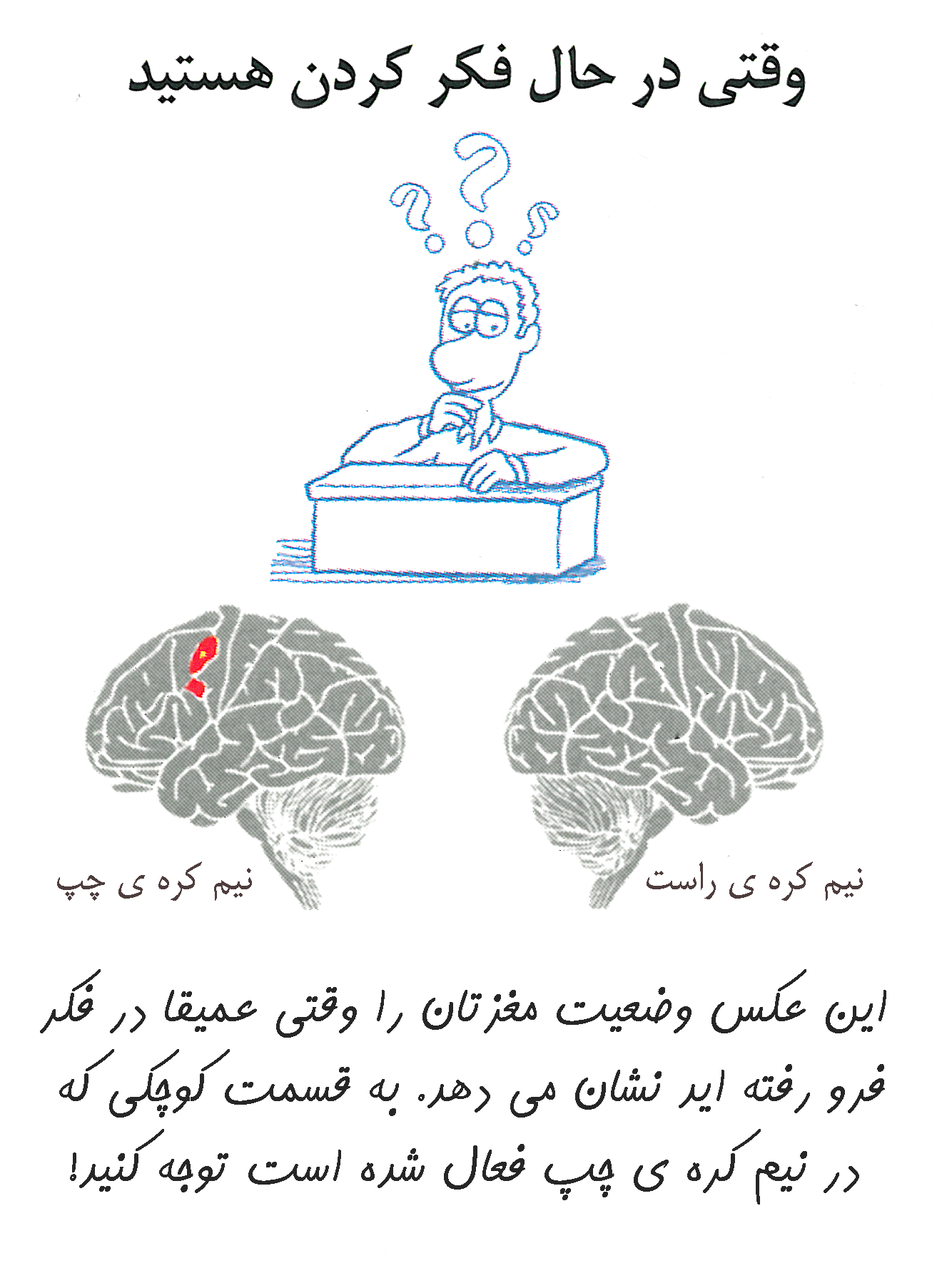
<style>
.page{position:relative;width:937px;height:1273px;background:#ffffff}
.page>*{position:absolute;margin:0}
.t1{font:46.4px "BMitra";color:#4e3d3d}
.t2{font:66.6px "BKamranBold";color:#272626}
</style>
<div class="page">
<p class="t1" style="left:57px;top:862px;width:195px;height:39px">نیم کره ی چپ</p>
<p class="t1" style="left:646px;top:862px;width:216px;height:39px">نیم کره ی راست</p>
<p class="t2" style="left:40px;top:969px;width:846px;height:236px;text-align:center">این عکس وضعیت مغزتان را وقتی عمیقا در فکر<br>فرو رفته اید نشان می دهد. به قسمت کوچکی که <br>در نیم کره ی چپ فعال شده است توجه کنید!</p>
</div>
